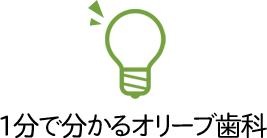
<style>
.page{position:relative;width:267px;height:138px;background:#ffffff}
.page>*{position:absolute;margin:0}
.t1{font:28px "TBChibiRGoPlusKPro-Regular";letter-spacing:-0.1em;color:#000000}
</style>
<div class="page">
<p class="t1" style="left:0px;top:112px;width:267px;height:26px">１分で分かるオリーブ歯科</p>
</div>
